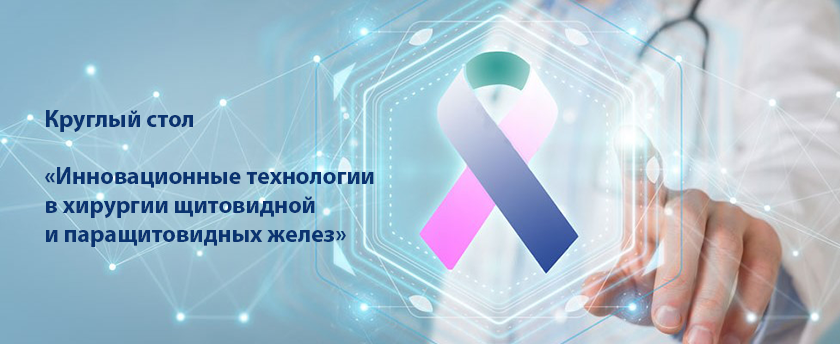
<style>
.page{position:relative;width:840px;height:344px}
.page>*{position:absolute;margin:0}
.t1{font:24px "MyriadPro-Bold";color:#0a3370}
</style>
<div class="page">
<p class="t1" style="left:45px;top:110px;width:329px;height:137px">Круглый стол <br><br>«Инновационные технологии <br>в хирургии щитовидной <br>и паращитовидных желез»</p>
</div>
